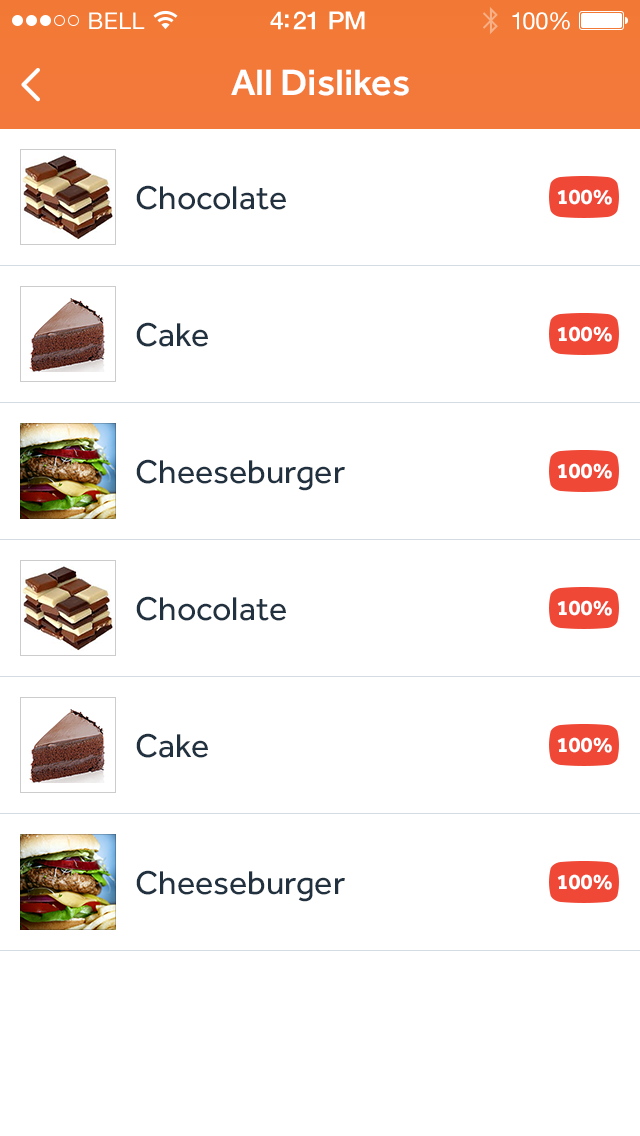
<style>
.page{position:relative;width:640px;height:1136px;background:#ffffff}
.page>*{position:absolute;margin:0}
.t1{font:23px "HelveticaNeue";letter-spacing:0.02em;color:#ffffff}
.t2{font:25px "HelveticaNeue-Medium";letter-spacing:-0.02em;color:#ffffff}
.t3{font:24px "HelveticaNeue";letter-spacing:-0.02em;color:#ffffff}
.t4{font:38px "Effra-Medium";color:#ffffff}
.t5{font:34px "Effra-Regular";color:#22313f}
.t6{font:22px "Effra-Bold";color:#ffffff}
</style>
<div class="page">
<p class="t1" style="left:89px;top:12px;width:56px;height:17px">BELL</p>
<p class="t2" style="left:270px;top:11px;width:95px;height:19px">4:21 PM</p>
<p class="t3" style="left:512px;top:12px;width:58px;height:18px">100%</p>
<p class="t4" style="left:231px;top:69px;width:178px;height:27px">All Dislikes</p>
<p class="t5" style="left:136px;top:185px;width:150px;height:25px">Chocolate</p>
<p class="t6" style="left:557px;top:189px;width:55px;height:16px">100%</p>
<p class="t5" style="left:136px;top:322px;width:72px;height:25px">Cake</p>
<p class="t6" style="left:557px;top:326px;width:55px;height:16px">100%</p>
<p class="t5" style="left:136px;top:459px;width:209px;height:32px">Cheeseburger</p>
<p class="t6" style="left:557px;top:463px;width:55px;height:16px">100%</p>
<p class="t5" style="left:136px;top:596px;width:150px;height:25px">Chocolate</p>
<p class="t6" style="left:557px;top:600px;width:55px;height:16px">100%</p>
<p class="t5" style="left:136px;top:733px;width:72px;height:25px">Cake</p>
<p class="t6" style="left:557px;top:737px;width:55px;height:16px">100%</p>
<p class="t5" style="left:136px;top:870px;width:209px;height:32px">Cheeseburger</p>
<p class="t6" style="left:557px;top:874px;width:55px;height:16px">100%</p>
</div>
